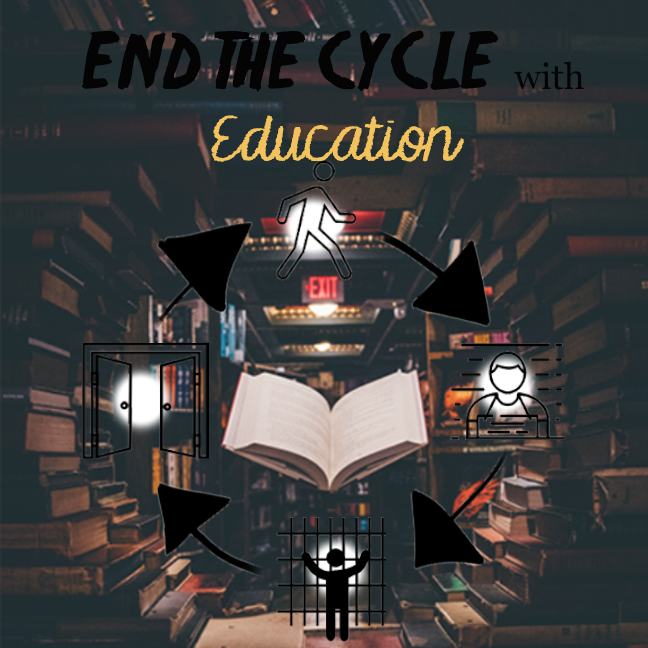
<style>
.page{position:relative;width:648px;height:648px}
.page>*{position:absolute;margin:0}
.t1{font:72px/36px "Friday13";color:#040404}
.t2{font:36px/36px "Georgia";color:#040404}
.t3{font:60px "KGMakesYouStronger";color:#f2c25c}
</style>
<div class="page">
<p class="t1" style="left:82px;top:30px;width:502px;height:132px;text-align:center">END THE CYCLE <span class="t2">with <br></span><span class="t3">Education</span></p>
</div>
